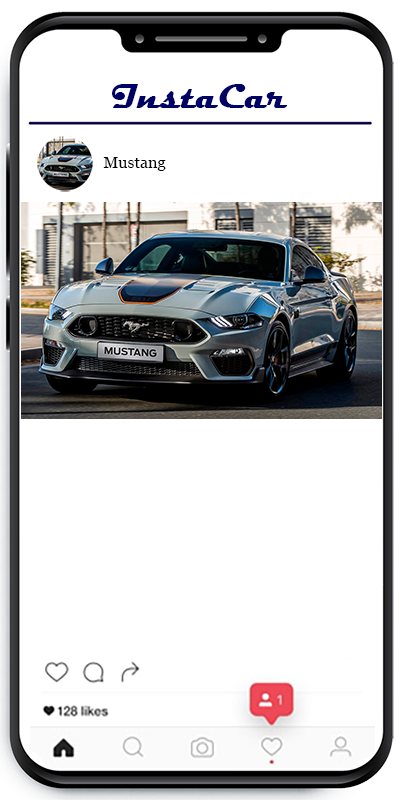
<style>
.page{position:relative;width:400px;height:800px;background:#ffffff}
.page>*{position:absolute;margin:0}
.t1{font:35.1px "Magneto-Bold";color:#000265}
.t2{font:16px "Georgia";color:#010101}
</style>
<div class="page">
<p class="t1" style="left:112px;top:84px;width:176px;height:24px">InstaCar</p>
<p class="t2" style="left:103px;top:157px;width:63px;height:14px">Mustang</p>
</div>
